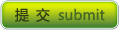
<style>
.page{position:relative;width:120px;height:31px}
.page>*{position:absolute;margin:0}
.t1{font:14px "MicrosoftYaHei";letter-spacing:0.1em;color:#2e3c15}
.t2{font:14px "MicrosoftYaHei";letter-spacing:0.01em;color:#456825}
</style>
<div class="page">
<p class="t1" style="left:15px;top:8px;width:35px;height:14px">提 交</p>
<p class="t2" style="left:58px;top:8px;width:47px;height:13px">submit</p>
</div>
